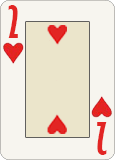
<style>
.page{position:relative;width:115px;height:160px;background:#f7f5ef}
.page>*{position:absolute;margin:0}
.t1{font:41.7px "GillSansMT-ExtraCondensedBold";color:#e22523}
</style>
<div class="page">
<p class="t1" style="left:8px;top:5px;width:10px;height:33px">20</p>
<p class="t1" style="left:97px;top:122px;width:10px;height:33px;rotate:180deg">2</p>
</div>
